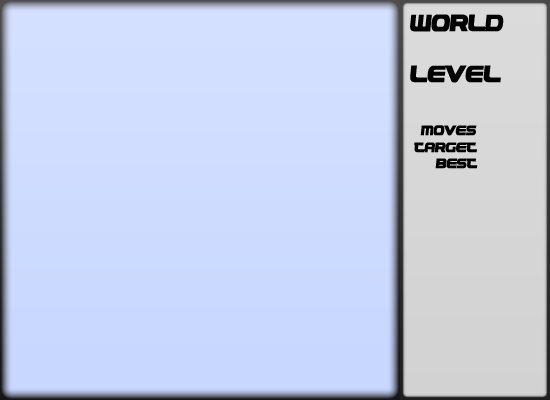
<style>
.page{position:relative;width:550px;height:400px}
.page>*{position:absolute;margin:0}
.t1{font:24px "!PEPSI!";color:#000000;font-weight:bold}
.t2{font:14px "!PEPSI!";color:#000000;font-weight:bold}
</style>
<div class="page">
<p class="t1" style="left:410px;top:14px;width:94px;height:18px">world</p>
<p class="t1" style="left:410px;top:65px;width:91px;height:18px">level</p>
<p class="t2" style="left:420px;top:125px;width:57px;height:11px">moves</p>
<p class="t2" style="left:414px;top:142px;width:63px;height:11px">target</p>
<p class="t2" style="left:435px;top:158px;width:43px;height:11px">best</p>
</div>
